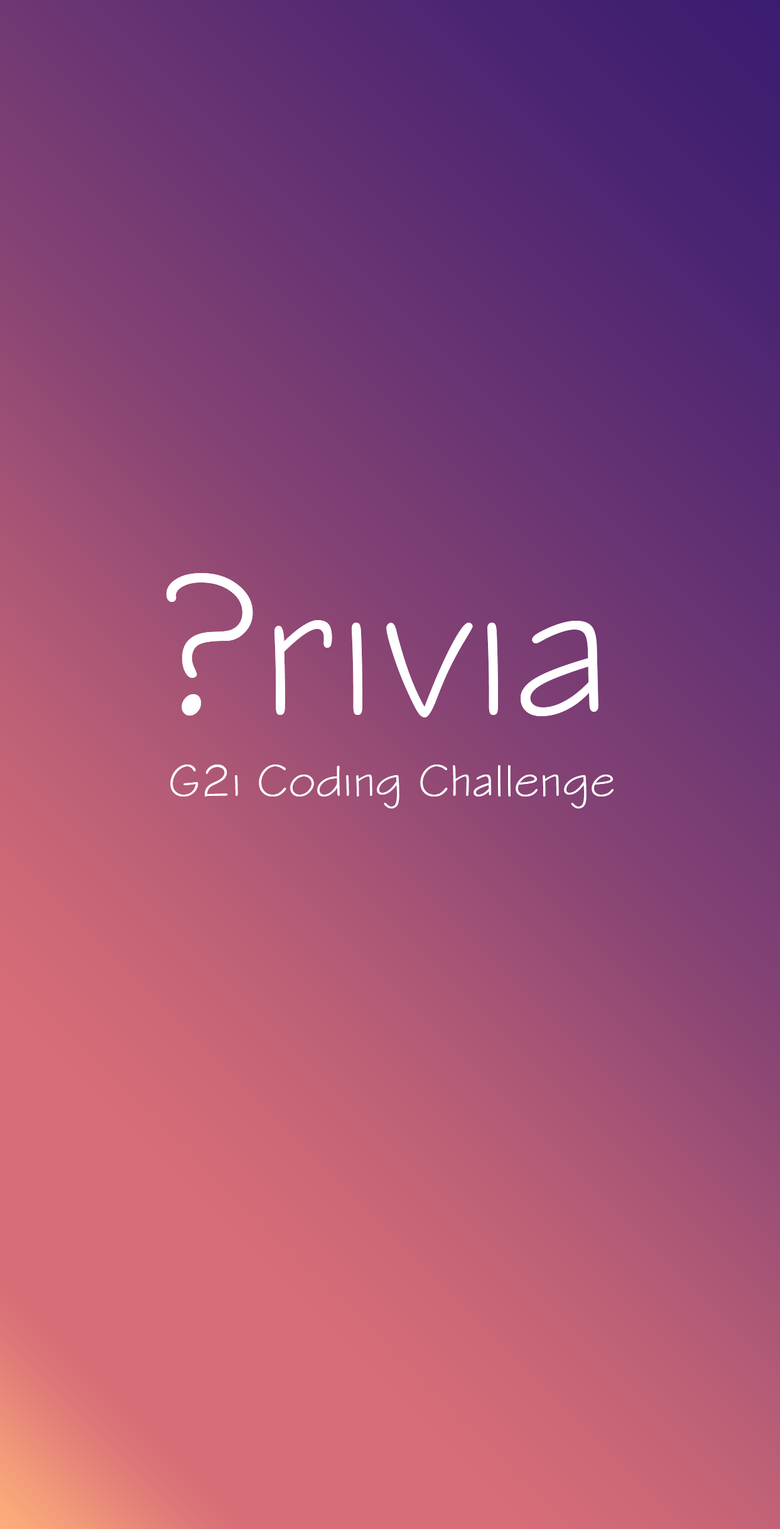
<style>
.page{position:relative;width:780px;height:1529px}
.page>*{position:absolute;margin:0}
.t1{font:209.3px "StylusBT";color:#ffffff}
.t2{font:47.1px "StylusBT";color:#ffffff}
</style>
<div class="page">
<p class="t1" style="left:166px;top:573px;width:432px;height:145px">?rivia</p>
<p class="t2" style="left:170px;top:765px;width:443px;height:44px">G2i Coding Challenge</p>
</div>
